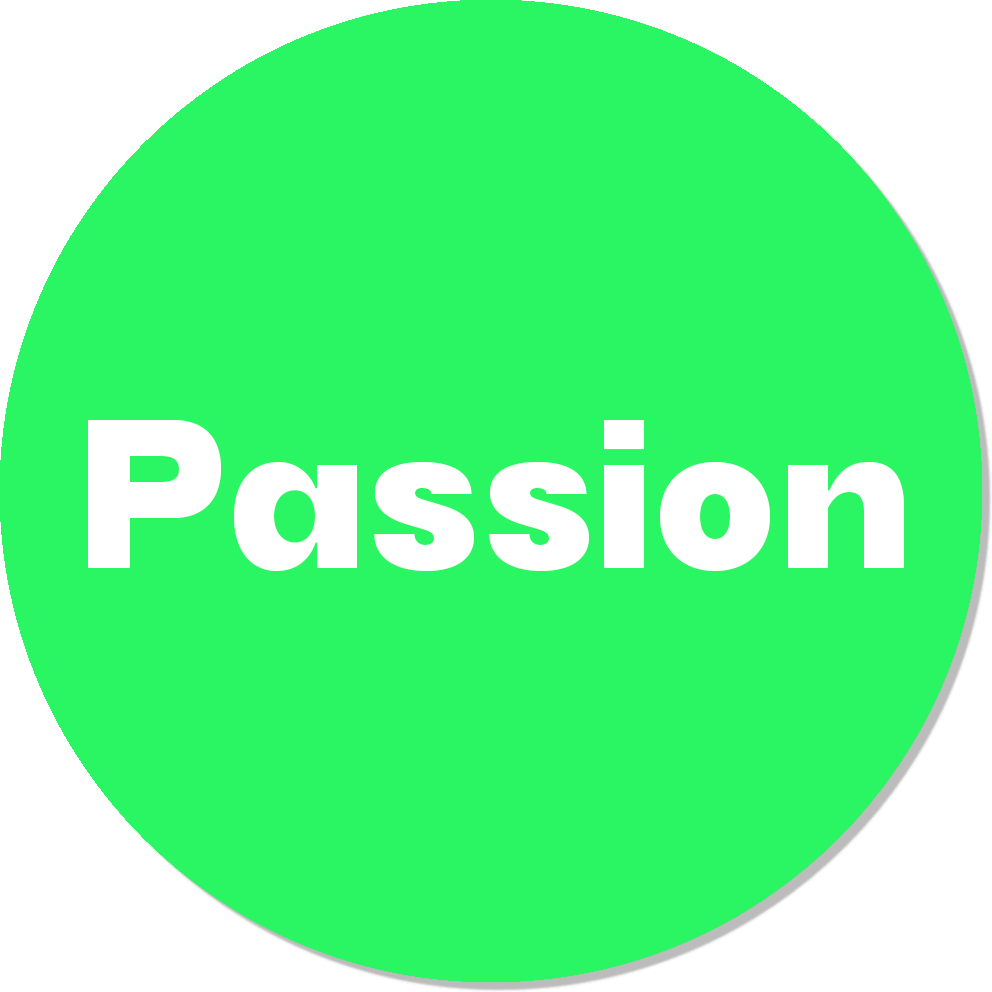
<style>
.page{position:relative;width:992px;height:992px;background:#2af563}
.page>*{position:absolute;margin:0}
.t1{font:200px "FONTSPRINGDEMO-TGHaidoGroteskBlackRegular";color:#ffffff}
</style>
<div class="page">
<p class="t1" style="left:88px;top:420px;width:816px;height:151px">Passion</p>
</div>
